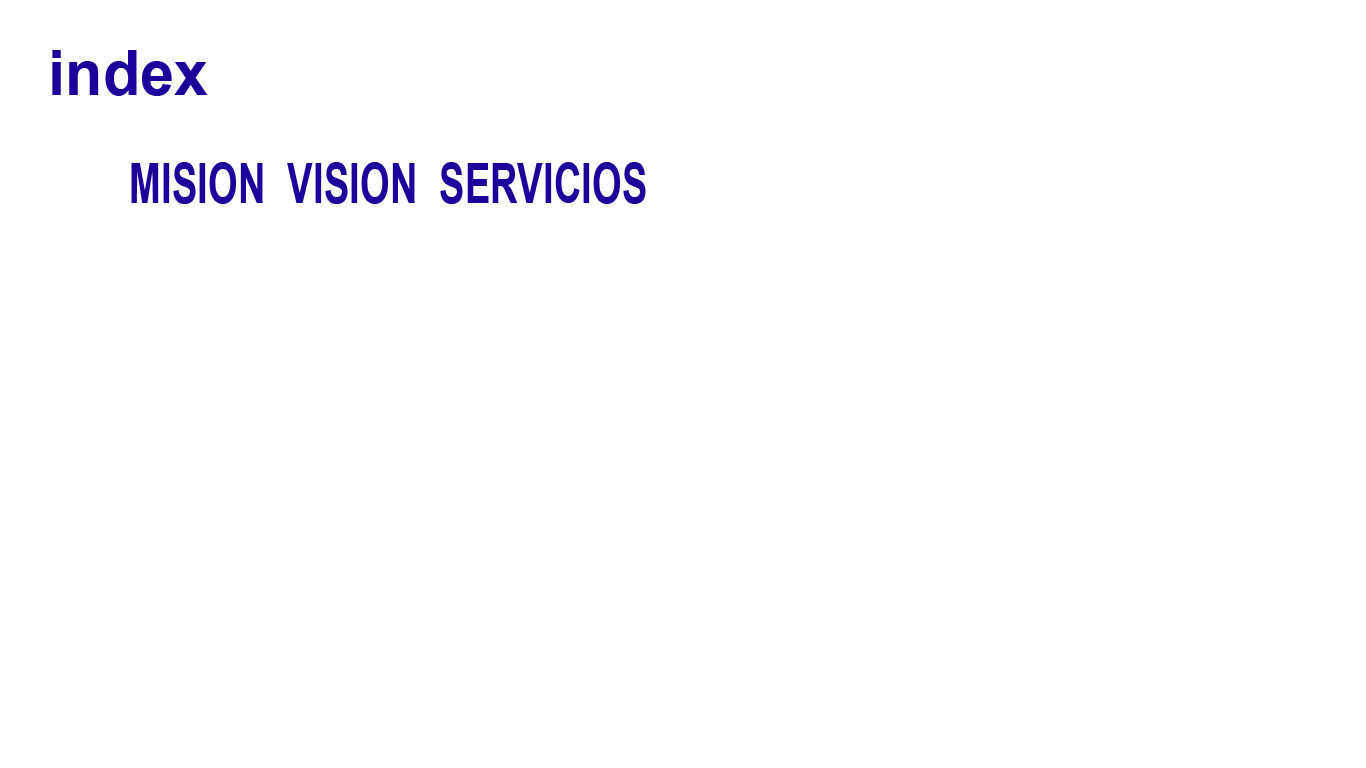
<style>
.page{position:relative;width:1366px;height:768px;background:#ffffff}
.page>*{position:absolute;margin:0}
.t1{font:63.4px "Arial-BoldMT";color:#1d009c;scale:0.97 1}
.t2{font:54.9px "Arial-BoldMT";color:#1d009c;scale:0.7 1}
</style>
<div class="page">
<p class="t1" style="left:52px;top:50px;width:156px;height:46px">index</p>
<p class="t2" style="left:131px;top:162px;width:515px;height:42px">MISION  VISION  SERVICIOS</p>
</div>
